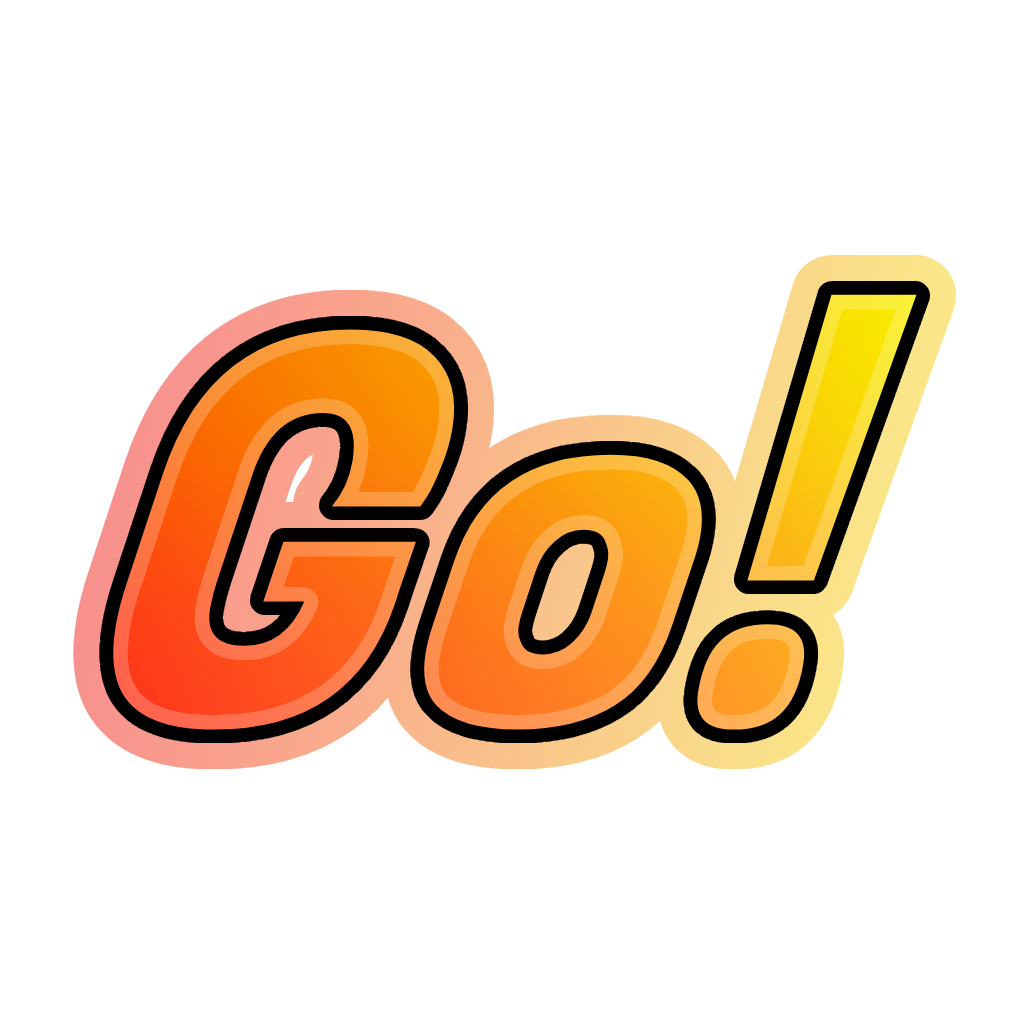
<style>
.page{position:relative;width:1024px;height:1024px;background:#ffffff}
.page>*{position:absolute;margin:0}
.t1{font:540px "FugazOne-Regular";font-style:italic;scale:0.93 1}
</style>
<div class="page">
<p class="t1" style="left:108px;top:294px;width:809px;height:436px">Go!</p>
</div>
